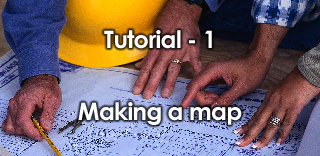
<style>
.page{position:relative;width:320px;height:156px}
.page>*{position:absolute;margin:0}
.t1{font:24px/36px "CenturyGothic-Bold";letter-spacing:-0.025em;color:#ffffff}
</style>
<div class="page">
<p class="t1" style="left:78px;top:30px;width:164px;height:95px;text-align:center">Tutorial - 1<br><br>Making a map</p>
</div>
